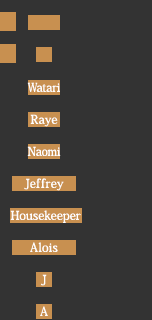
<style>
.page{position:relative;width:152px;height:320px;background:#333333}
.page>*{position:absolute;margin:0}
.t1{font:12px/32px "KozMinPro-Medium";color:#ffffff}
.t2{font:12px/32px "KozMinPro-Medium";letter-spacing:-0.05em;color:#ffffff;scale:0.8 1}
.t3{font:12px/32px "KozMinPro-Medium";letter-spacing:-0.025em;color:#ffffff}
.t4{font:12px/32px "KozMinPro-Medium";letter-spacing:-0.025em;color:#ffffff;scale:0.9 1}
.t5{font:12px/32px "KozMinPro-Medium";letter-spacing:0.025em;color:#ffffff}
.t6{font:10.8px/32px "KozMinPro-Medium";letter-spacing:0.025em;color:#ffffff;scale:1.11 1}
.t7{font:12px/32px "KozMinPro-Medium";letter-spacing:-0.01em;color:#ffffff}
.t8{font:12px/32px "KozMinPro-Medium";letter-spacing:-0.01em;color:#ffffff;scale:0.9 1}
.t9{font:12px/32px "KozMinPro-Medium";letter-spacing:0.05em;color:#ffffff}
</style>
<div class="page">
<p class="t1" style="left:10px;top:82px;width:71px;height:234px;text-align:center"><span class="t2">W</span><span class="t3">ata</span><span class="t4">r</span><span class="t3">i<br></span><span class="t5">Ra</span><span class="t6">y</span><span class="t5">e<br></span><span class="t7">Na</span><span class="t8">om</span><span class="t7">i<br></span><span class="t5">Je</span><span class="t9">f</span><span class="t5">fre</span><span class="t6">y<br></span> Housekeeper<br><span class="t5">Alois<br>J<br>A</span></p>
</div>
